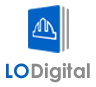
<style>
.page{position:relative;width:96px;height:87px;background:#ffffff}
.page>*{position:absolute;margin:0}
.t1{font:20px "CenturyGothic-Bold";color:#8a8a8a}
.t2{font:20px "CenturyGothic-Bold";color:#0661ba}
</style>
<div class="page">
<p class="t1" style="left:6px;top:63px;width:84px;height:20px"><span class="t2">LO</span>Digital</p>
</div>
